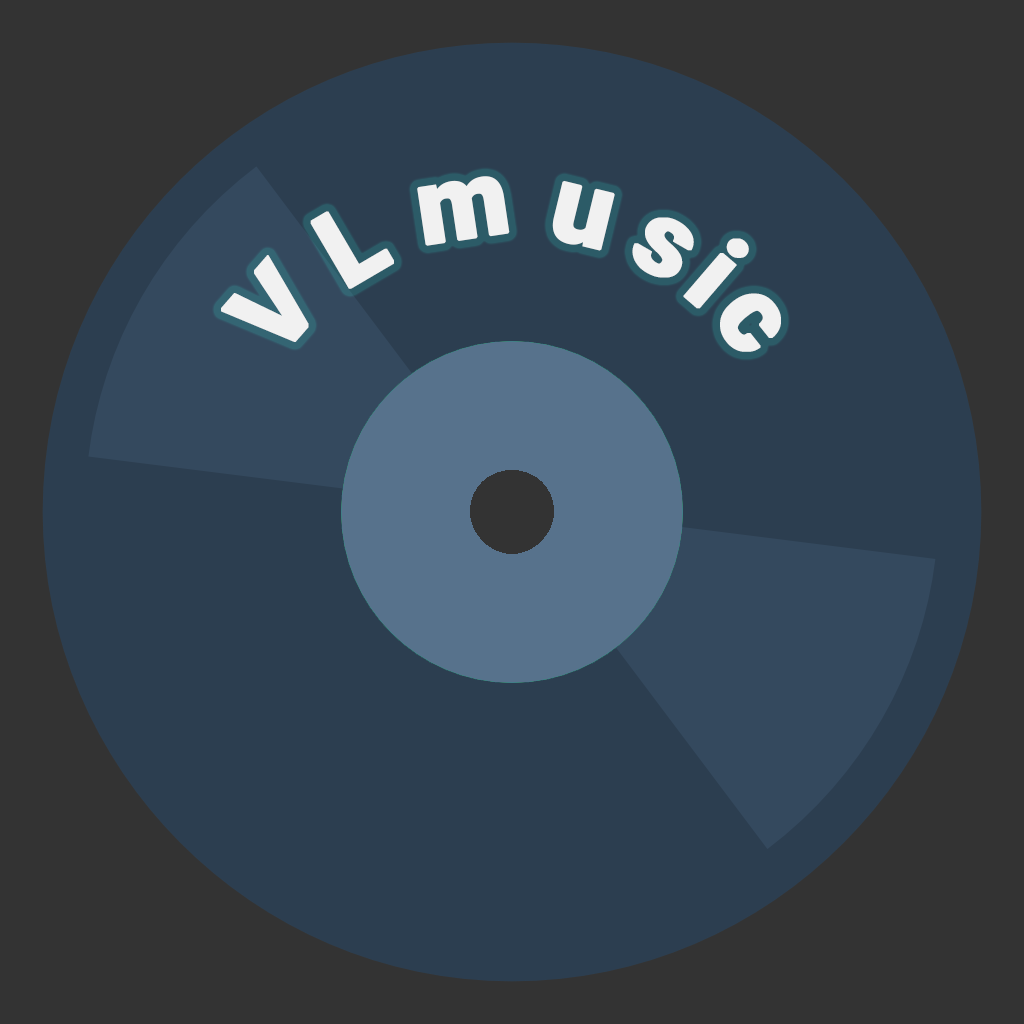
<style>
.page{position:relative;width:1024px;height:1024px;background:#2c3e50}
.page>*{position:absolute;margin:0}
.t1{font:106.7px "Roboto-Black";letter-spacing:-0.1em;color:#f1f1f1;font-weight:bold}
</style>
<div class="page">
<p class="t1" style="left:221px;top:176px;width:560px;height:176px">VLmusic</p>
</div>
